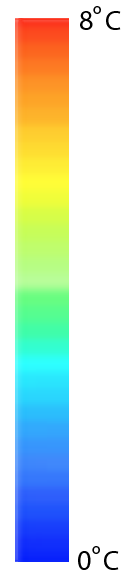
<style>
.page{position:relative;width:138px;height:576px;background:#ffffff}
.page>*{position:absolute;margin:0}
.t1{font:16px "MyriadPro-Regular";color:#000000}
.t2{font:28px "MyriadPro-Regular";color:#000000}
</style>
<div class="page">
<p class="t1" style="left:93px;top:6px;width:8px;height:8px">o</p>
<p class="t2" style="left:80px;top:11px;width:41px;height:19px">8  C</p>
<p class="t2" style="left:78px;top:551px;width:41px;height:19px">0  C</p>
<p class="t1" style="left:92px;top:546px;width:8px;height:8px">o</p>
</div>
